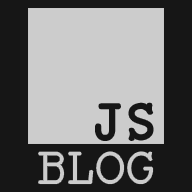
<style>
.page{position:relative;width:192px;height:192px;background:#cccccc}
.page>*{position:absolute;margin:0}
.t1{font:60px "Monospace";letter-spacing:-0.05em;color:#161616}
.t2{font:54px "Monospace";letter-spacing:-0.05em;color:#cccccc}
</style>
<div class="page">
<p class="t1" style="left:97px;top:104px;width:55px;height:35px">JS</p>
<p class="t2" style="left:39px;top:152px;width:114px;height:32px">BLOG</p>
</div>
